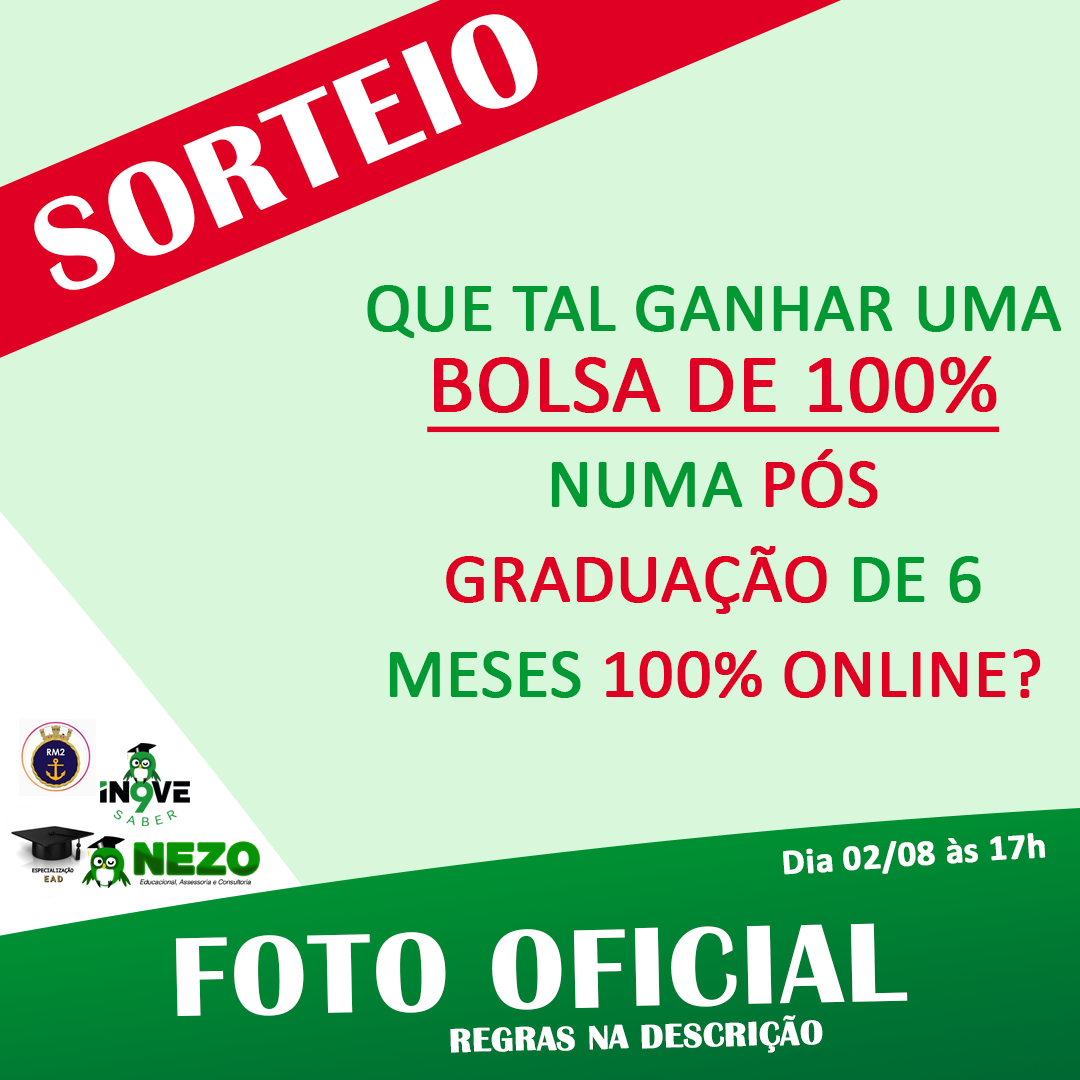
<style>
.page{position:relative;width:1080px;height:1080px;background:#d9f7db}
.page>*{position:absolute;margin:0}
.t1{font:134.5px "BritannicBold";color:#ffffff;font-weight:bold}
.t2{font:69.5px "Calibri";color:#009933;font-weight:bold}
.t3{font:84.1px/81.5px "Calibri";color:#df0024;font-weight:bold;text-decoration:underline}
.t4{font:69.5px/94.9px "Calibri";color:#009933;font-weight:bold}
.t5{font:69.5px/94.9px "Calibri";color:#df0024;font-weight:bold}
.t6{font:69.5px "Calibri";color:#df0024;font-weight:bold}
.t7{font:36px "Calibri-Bold";color:#ffffff;font-weight:bold}
.t8{font:116.1px "BritannicBold";color:#ffffff;font-weight:bold}
.t9{font:34.5px "BritannicBold";color:#ffffff;font-weight:bold}
</style>
<div class="page">
<p class="t1" style="left:34px;top:14px;width:504px;height:276px;rotate:-23deg">SORTEIO</p>
<p class="t2" style="left:367px;top:285px;width:695px;height:413px;text-align:center">QUE TAL GANHAR UMA <br><span class="t3">BOLSA DE 100% <br></span><span class="t4">NUMA </span><span class="t5">PÓS <br>GRADUAÇÃO </span><span class="t4">DE 6 MESES </span><span class="t6">100% ONLINE?</span></p>
<p class="t7" style="left:783px;top:833px;width:263px;height:42px;rotate:-4deg">Dia 02/08 às 17h</p>
<p class="t8" style="left:175px;top:923px;width:733px;height:94px;rotate:-1deg">FOTO OFICIAL</p>
<p class="t9" style="left:450px;top:1015px;width:373px;height:38px;rotate:-1deg">REGRAS NA DESCRIÇÃO</p>
</div>
